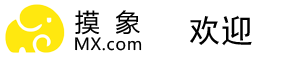
<style>
.page{position:relative;width:298px;height:60px;background:#ffffff}
.page>*{position:absolute;margin:0}
.t1{font:24.8px "MicrosoftYaHei";letter-spacing:0.64em;color:#000000}
.t2{font:32px "SimHei";letter-spacing:0.04em;color:#000000}
.t3{font:16.5px "MicrosoftYaHei";letter-spacing:0.04em;color:#000000}
</style>
<div class="page">
<p class="t1" style="left:75px;top:10px;width:65px;height:25px">摸象</p>
<p class="t2" style="left:190px;top:15px;width:62px;height:31px">欢迎</p>
<p class="t3" style="left:75px;top:37px;width:67px;height:14px">MX.com</p>
</div>
